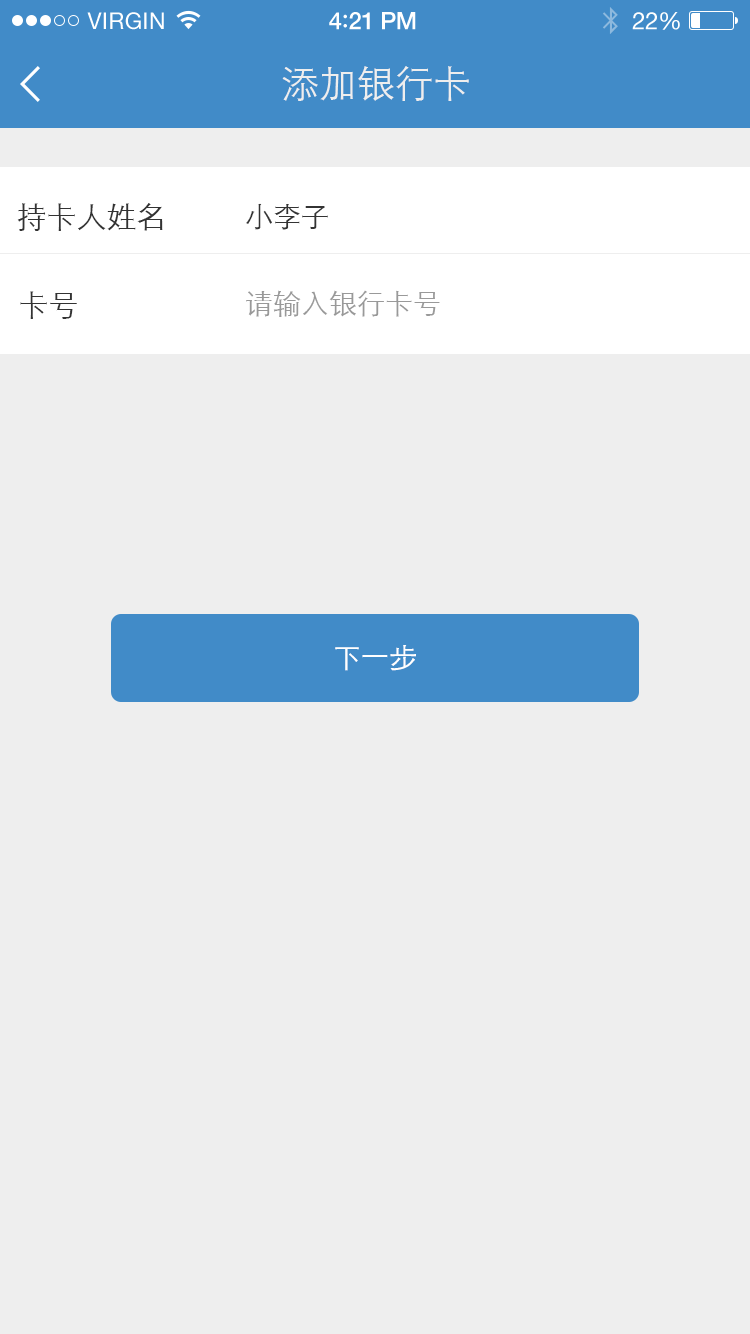
<style>
.page{position:relative;width:750px;height:1334px;background:#eeeeee}
.page>*{position:absolute;margin:0}
.t1{font:23px "HelveticaNeue";letter-spacing:0.02em;color:#ffffff}
.t2{font:24px "HelveticaNeue-Medium";letter-spacing:-0.02em;color:#ffffff}
.t3{font:26px "Avenir-Medium";letter-spacing:-0.02em;color:#ffffff}
.t4{font:24px "HelveticaNeue";letter-spacing:-0.02em;color:#ffffff}
.t5{font:38px "STXihei";color:#eeeeee}
.t6{font:30px "STXihei";color:#333333}
.t7{font:28px "STXihei";color:#333333}
.t8{font:28px "STXihei";color:#999999}
.t9{font:28px "STXihei";color:#ffffff}
</style>
<div class="page">
<p class="t1" style="left:87px;top:12px;width:77px;height:18px">VIRGIN</p>
<p class="t2" style="left:329px;top:12px;width:87px;height:18px">4<span class="t3">:</span>21 PM</p>
<p class="t4" style="left:632px;top:12px;width:48px;height:18px">22%</p>
<p class="t5" style="left:282px;top:66px;width:187px;height:35px">添加银行卡</p>
<p class="t6" style="left:17px;top:203px;width:146px;height:28px">持卡人姓名</p>
<p class="t7" style="left:246px;top:203px;width:82px;height:27px">小李子</p>
<p class="t6" style="left:20px;top:291px;width:57px;height:28px">卡号</p>
<p class="t8" style="left:246px;top:290px;width:194px;height:27px">请输入银行卡号</p>
<p class="t9" style="left:335px;top:645px;width:81px;height:26px">下一步</p>
</div>
